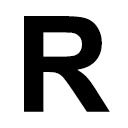
<style>
.page{position:relative;width:128px;height:128px;background:#ffffff}
.page>*{position:absolute;margin:0}
.t1{font:133.3px "Arial-BoldMT";color:#000000}
</style>
<div class="page">
<p class="t1" style="left:24px;top:16px;width:86px;height:96px">R</p>
</div>
